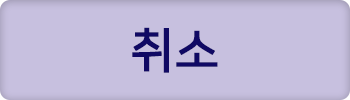
<style>
.page{position:relative;width:350px;height:100px;background:#c7c0df}
.page>*{position:absolute;margin:0}
.t1{font:48px "NanumSquareB";color:#100964;font-weight:bold}
</style>
<div class="page">
<p class="t1" style="left:132px;top:27px;width:86px;height:46px">취소</p>
</div>
